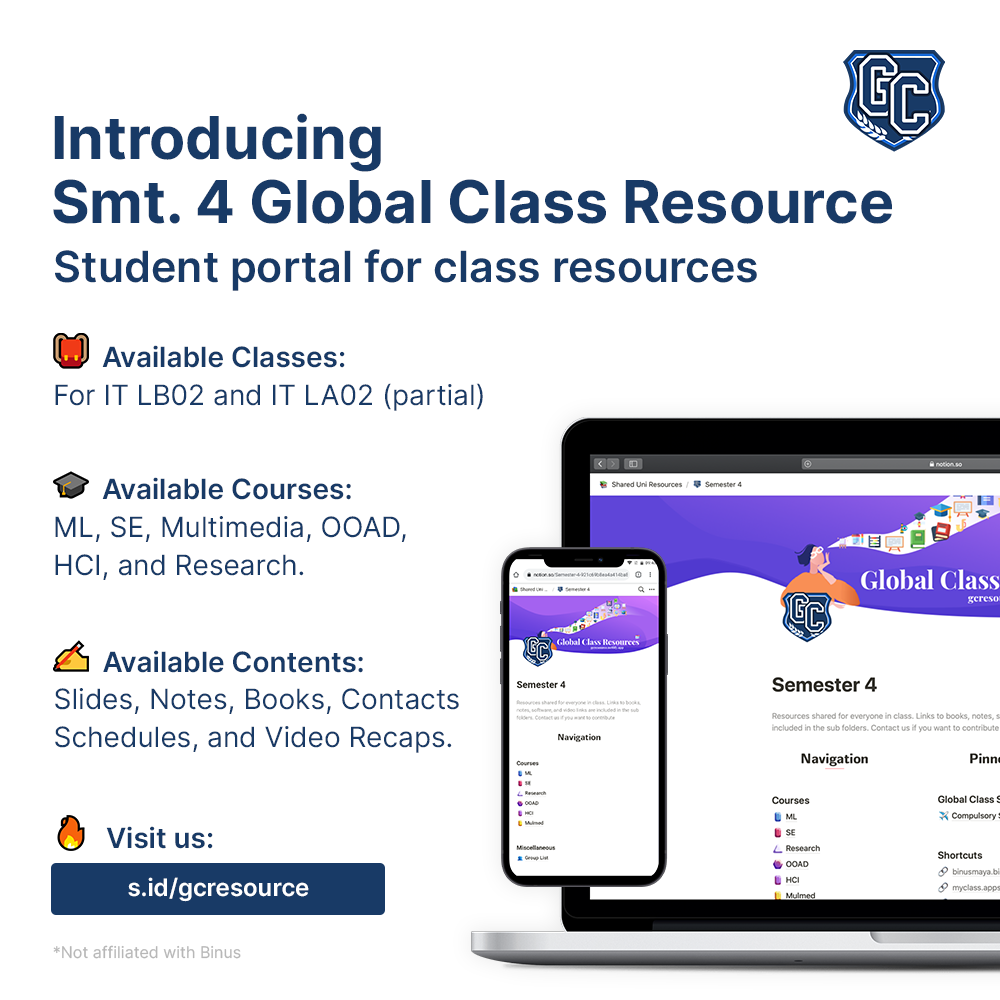
<style>
.page{position:relative;width:1000px;height:1000px;background:#ffffff}
.page>*{position:absolute;margin:0}
.t1{font:59px/64.3px "Inter-Bold";color:#183a66}
.t2{font:43px "Inter-SemiBold";color:#183a66}
.t3{font:28px/38px "Inter-Regular";color:#183a66}
.t4{font:28px/38px "Inter-SemiBold";color:#183a66}
.t5{font:27.9px/37.9px "Inter-Regular";color:#183a66}
.t6{font:27.9px/37.9px "Inter-SemiBold";color:#183a66}
.t7{font:28px "Inter-SemiBold";color:#183a66}
.t8{font:24px "Inter-SemiBold";color:#ffffff}
.t9{font:16px "Inter-Regular";color:#b7b7b7}
</style>
<div class="page">
<p class="t1" style="left:53px;top:113px;width:839px;height:111px">Introducing <br>Smt. 4 Global Class Resource</p>
<p class="t2" style="left:55px;top:249px;width:702px;height:42px">Student portal for class resources</p>
<p class="t3" style="left:55px;top:345px;width:428px;height:66px"><span class="t4">       Available Classes:<br></span>For IT LB02 and IT LA02 (partial)</p>
<p class="t3" style="left:55px;top:477px;width:351px;height:103px"><span class="t4">       Available Courses:<br></span>ML, SE, Multimedia, OOAD, <br>HCI, and Research.</p>
<p class="t5" style="left:55px;top:650px;width:404px;height:103px"><span class="t6">       Available Contents:<br></span>Slides, Notes, Books, Contacts<br>Schedules, and Video Recaps.</p>
<p class="t7" style="left:106px;top:826px;width:107px;height:23px">Visit us:</p>
<p class="t8" style="left:128px;top:877px;width:181px;height:25px">s.id/gcresource</p>
<p class="t9" style="left:53px;top:945px;width:188px;height:14px">*Not affiliated with Binus</p>
</div>
